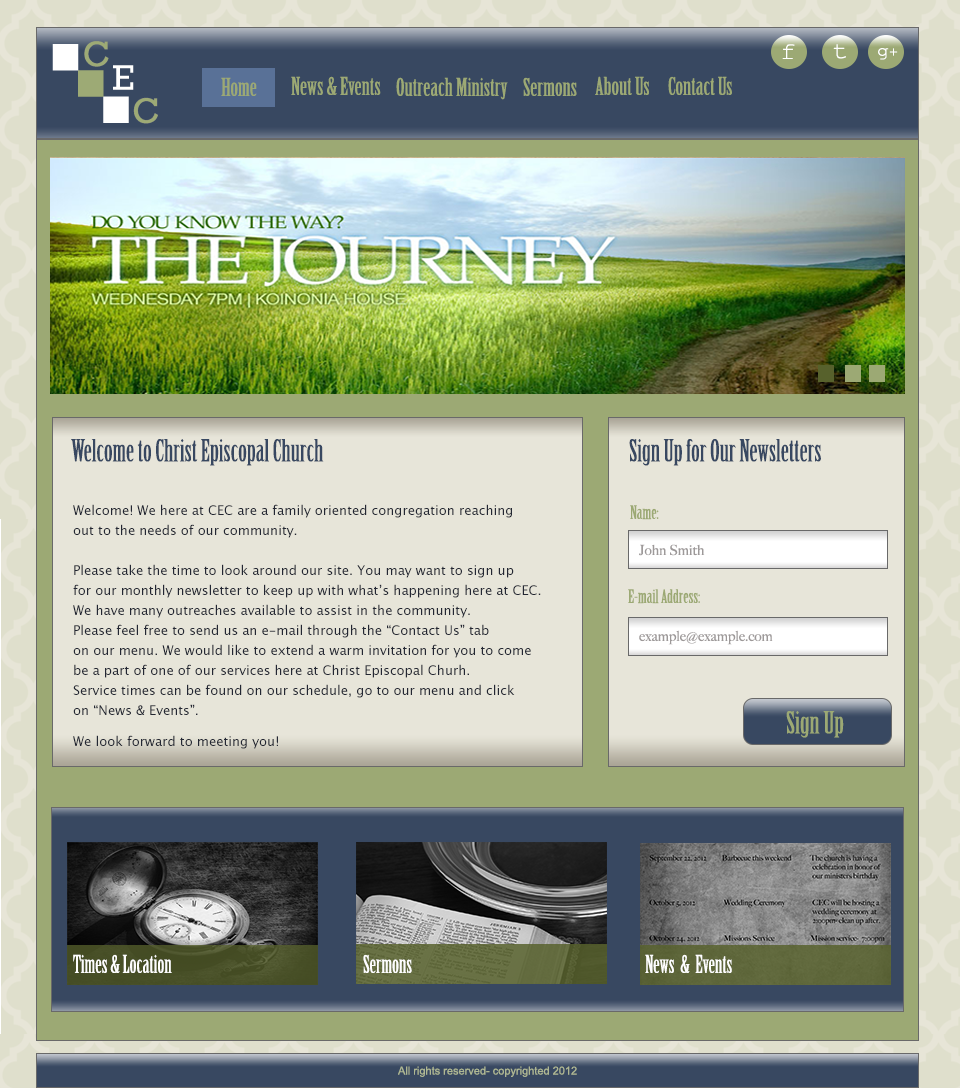
<style>
.page{position:relative;width:960px;height:1088px}
.page>*{position:absolute;margin:0}
.t1{font:24px "CourierNewPSMT";color:#ffffff;scale:1.1 1}
.t2{font:18px "CourierNewPSMT";color:#ffffff;scale:1.1 1}
.t3{font:14px "CourierNewPSMT";color:#ffffff;scale:1.1 1}
.t4{font:24px "BirchStd";color:#9ca974;scale:1.1 1}
.t5{font:30px "BirchStd";color:#384861}
.t6{font:13px/20px "LucidaGrande";color:#232733}
.t7{font:13px "LucidaGrande";color:#232733}
.t8{font:18px "BirchStd";color:#9ca974;scale:1.1 1}
.t9{font:14px "BigCaslon-Medium";color:#9d9999}
.t10{font:30px "BirchStd";color:#9ca974;scale:1.08 1}
.t11{font:24px "BirchStd";color:#fefefe}
.t12{font:11.1px "ArialMT";color:#afb893}
</style>
<div class="page">
<p class="t1" style="left:782px;top:44px;width:13px;height:15px">f</p>
<p class="t1" style="left:833px;top:44px;width:13px;height:15px">t</p>
<p class="t2" style="left:878px;top:48px;width:20px;height:12px">g<span class="t3">+</span></p>
<p class="t4" style="left:221px;top:77px;width:36px;height:19px">Home</p>
<p class="t4" style="left:291px;top:76px;width:90px;height:19px">News &amp; Events</p>
<p class="t4" style="left:396px;top:77px;width:112px;height:23px">Outreach Ministry</p>
<p class="t4" style="left:523px;top:77px;width:54px;height:19px">Sermons</p>
<p class="t4" style="left:595px;top:76px;width:54px;height:19px">About Us</p>
<p class="t4" style="left:668px;top:76px;width:64px;height:19px">Contact Us</p>
<p class="t5" style="left:71px;top:439px;width:253px;height:27px">Welcome to Christ Episcopal Church</p>
<p class="t5" style="left:629px;top:439px;width:192px;height:27px">Sign Up for Our Newsletters</p>
<p class="t6" style="left:73px;top:504px;width:468px;height:245px">Welcome! We here at CEC are a family oriented congregation reaching <br>out to the needs of our community. <br><br>Please take the time to look around our site. You may want to sign up <br>for our monthly newsletter to keep up with what’s happening here at CEC. <br>We have many outreaches available to assist in the community. <br>Please feel free to send us an e-mail through the “Contact Us” tab <br>on our menu. We would like to extend a warm invitation for you to come <br>be a part of one of our services here at Christ Episcopal Churh. <br>Service times can be found on our schedule, go to our menu and click <br>on “News &amp; Events”.<br><span class="t7"><br>We look forward to meeting you!</span></p>
<p class="t8" style="left:630px;top:505px;width:29px;height:15px">Name:</p>
<p class="t9" style="left:639px;top:544px;width:66px;height:12px">John Smith</p>
<p class="t8" style="left:628px;top:589px;width:72px;height:15px">E-mail Address:</p>
<p class="t9" style="left:639px;top:630px;width:134px;height:15px">example@example.com</p>
<p class="t10" style="left:786px;top:711px;width:58px;height:27px">Sign Up</p>
<p class="t11" style="left:73px;top:954px;width:99px;height:19px">Times &amp; Location</p>
<p class="t11" style="left:363px;top:954px;width:49px;height:19px">Sermons</p>
<p class="t11" style="left:645px;top:954px;width:87px;height:19px">News  &amp;  Events</p>
<p class="t12" style="left:398px;top:1066px;width:179px;height:11px">All rights reserved- copyrighted 2012</p>
</div>
